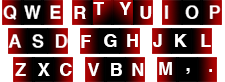
<style>
.page{position:relative;width:225px;height:82px;background:#ffffff}
.page>*{position:absolute;margin:0}
.t1{font:18px "Helvetica-Bold";letter-spacing:-0.05em;color:#ffffff}
</style>
<div class="page">
<p class="t1" style="left:74px;top:6px;width:12px;height:13px">R</p>
<p class="t1" style="left:93px;top:2px;width:11px;height:13px">T</p>
<p class="t1" style="left:119px;top:2px;width:13px;height:13px">Y</p>
<p class="t1" style="left:140px;top:6px;width:12px;height:13px">U</p>
<p class="t1" style="left:81px;top:35px;width:10px;height:13px">F</p>
<p class="t1" style="left:104px;top:34px;width:13px;height:13px">G</p>
<p class="t1" style="left:127px;top:34px;width:11px;height:13px">H</p>
<p class="t1" style="left:153px;top:34px;width:9px;height:13px">J</p>
<p class="t1" style="left:175px;top:34px;width:12px;height:13px">K</p>
<p class="t1" style="left:201px;top:34px;width:10px;height:13px">L</p>
<p class="t1" style="left:15px;top:63px;width:11px;height:13px">Z</p>
<p class="t1" style="left:38px;top:63px;width:12px;height:13px">X</p>
<p class="t1" style="left:60px;top:63px;width:12px;height:13px">C</p>
<p class="t1" style="left:87px;top:63px;width:13px;height:13px">V</p>
<p class="t1" style="left:111px;top:63px;width:11px;height:13px">B</p>
<p class="t1" style="left:132px;top:63px;width:12px;height:13px">N</p>
<p class="t1" style="left:159px;top:62px;width:13px;height:13px">M</p>
<p class="t1" style="left:186px;top:68px;width:4px;height:6px">,</p>
<p class="t1" style="left:209px;top:69px;width:3px;height:3px">.</p>
</div>
